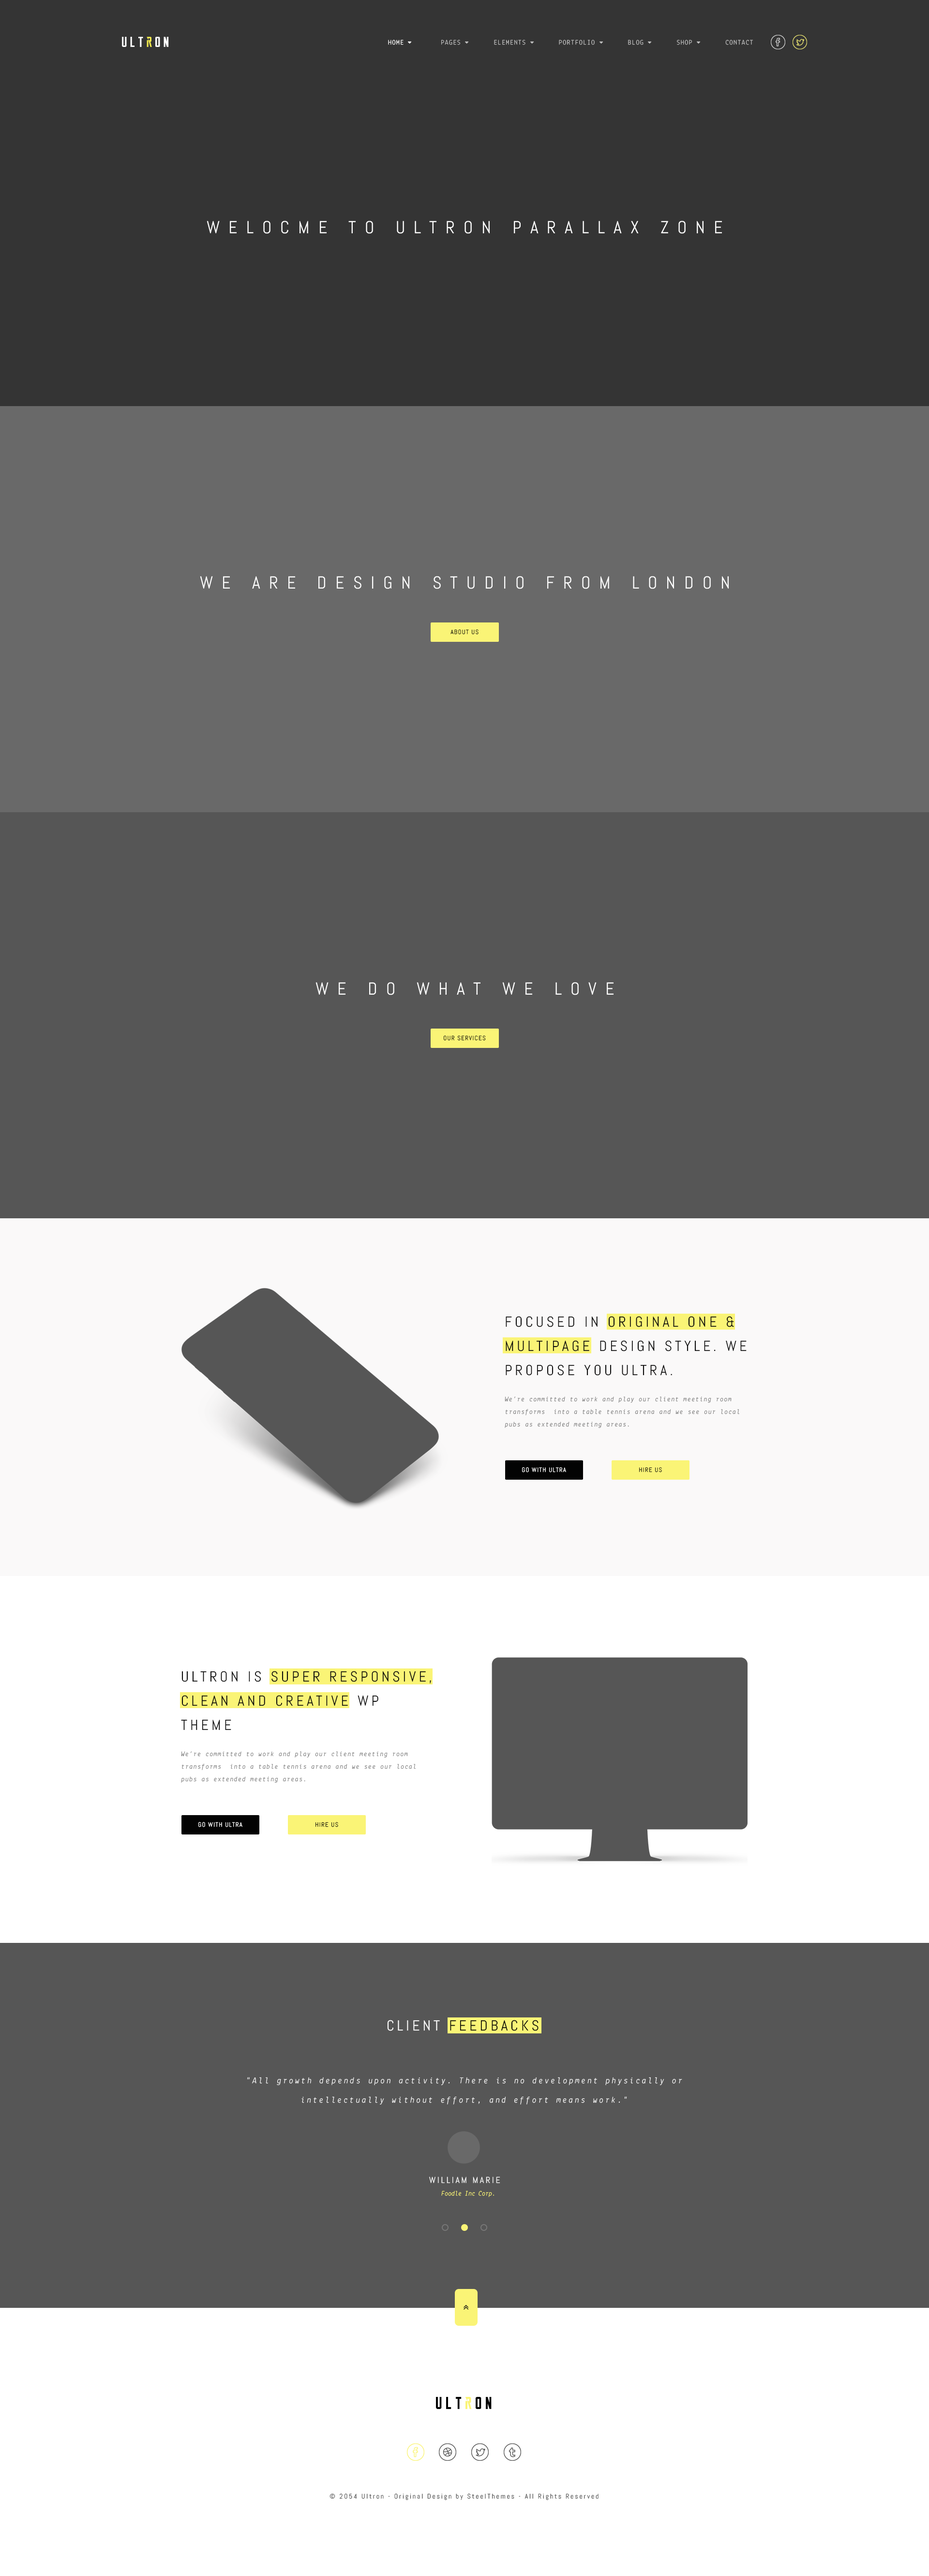
<style>
.page{position:relative;width:929px;height:2576px;background:#565656}
.page>*{position:absolute;margin:0}
.t1{font:6.8px "Lekton-Regular";letter-spacing:0.1em;color:#bfbfbf;text-transform:uppercase}
.t2{font:6.8px "Lekton-Regular";letter-spacing:0.1em;color:#ffffff;text-transform:uppercase}
.t3{font:17.4px "Abel-Regular";letter-spacing:0.5em;color:#ffffff;text-transform:uppercase}
.t4{font:6.3px "Abel-Regular";letter-spacing:0.1em;color:#030303;text-transform:uppercase}
.t5{font:6.3px "Abel-Regular";letter-spacing:0.1em;text-transform:uppercase}
.t6{font:14.5px/24.2px "Abel-Regular";letter-spacing:0.2em;color:#0b0b0b;text-transform:uppercase}
.t7{font:6.8px/12.6px "Lekton-Italic";letter-spacing:0.1em;color:#787878}
.t8{font:6.3px "Abel-Regular";letter-spacing:0.1em;color:#ffffff;text-transform:uppercase}
.t9{font:8.7px/19.4px "Lekton-Italic";letter-spacing:0.2em;color:#ffffff}
.t10{font:6.8px/12.6px "Lekton-Italic";color:#faf476}
.t11{font:8.7px/33.9px "Abel-Regular";letter-spacing:0.2em;color:#ffffff;text-transform:uppercase}
.t12{font:17.4px "ReckonerBold";letter-spacing:0.2em;color:#030303}
.t13{font:17.4px "ReckonerBold";letter-spacing:0.2em;color:#faf476}
.t14{font:6.8px "Abel-Regular";letter-spacing:0.2em;color:#4f4f4f}
</style>
<div class="page">
<p class="t1" style="left:388px;top:40px;width:365px;height:5px"><span class="t2">Home         </span>Pages        Elements        Portfolio        Blog        Shop        Contact</p>
<p class="t3" style="left:207px;top:221px;width:515px;height:13px">Welocme to ultron Parallax zone</p>
<p class="t3" style="left:200px;top:576px;width:529px;height:13px">We are design Studio from London</p>
<p class="t4" style="left:451px;top:629px;width:28px;height:6px">About us</p>
<p class="t3" style="left:316px;top:982px;width:298px;height:13px">We do what we love</p>
<p class="t5" style="left:444px;top:1035px;width:42px;height:6px">our Services</p>
<p class="t6" style="left:506px;top:1316px;width:241px;height:60px">Focused in Original One &amp; <br>Multipage Design Style. We<br>pr0pose you Ultra.</p>
<p class="t7" style="left:505px;top:1396px;width:235px;height:32px">We’re committed to work and play our client meeting room transforms  into a table tennis arena and we see our local pubs as extended meeting areas.</p>
<p class="t8" style="left:522px;top:1467px;width:44px;height:5px">Go with Ultra</p>
<p class="t5" style="left:639px;top:1467px;width:23px;height:5px">Hire US</p>
<p class="t6" style="left:181px;top:1671px;width:250px;height:59px">Ultron is Super Responsive, clean and creative wp theme</p>
<p class="t7" style="left:181px;top:1751px;width:235px;height:32px">We’re committed to work and play our client meeting room transforms  into a table tennis arena and we see our local pubs as extended meeting areas.</p>
<p class="t8" style="left:198px;top:1822px;width:44px;height:5px">Go with Ultra</p>
<p class="t5" style="left:316px;top:1822px;width:22px;height:5px">Hire US</p>
<p class="t9" style="left:247px;top:2077px;width:435px;height:28px;text-align:center">"All growth depends upon activity. There is no development physically or<br>intellectually without effort, and effort means work."</p>
<p class="t10" style="left:429px;top:2177px;width:71px;height:20px;text-align:center"><span class="t11">William marie  <br></span>Foodle Inc Corp.</p>
<p class="t12" style="left:436px;top:2397px;width:56px;height:12px">Ult<span class="t13">r</span>on</p>
<p class="t14" style="left:330px;top:2493px;width:269px;height:7px">© 2054 Ultron - Original Design by SteelThemes - All Rights Reserved</p>
</div>
